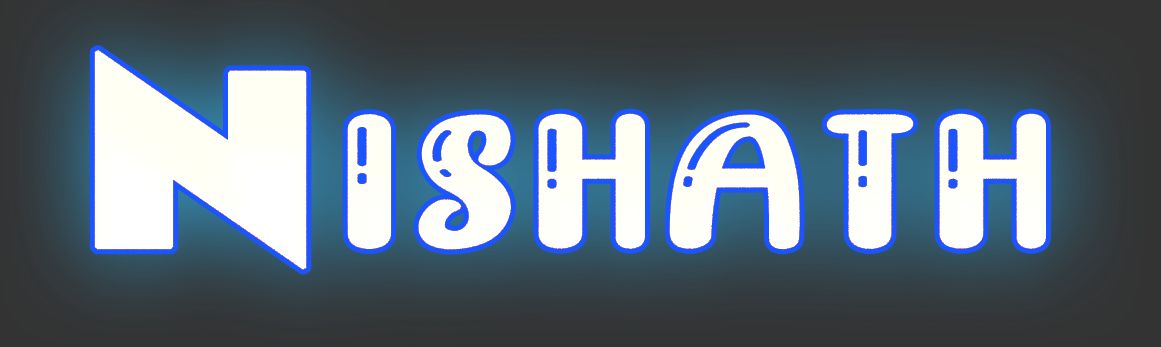
<style>
.page{position:relative;width:1161px;height:347px}
.page>*{position:absolute;margin:0}
.t1{font:151.6px "BrighlyCrush-Shine";letter-spacing:0.06em;color:#ffffff;font-weight:bold;scale:1.44 1}
.t2{font:210.3px "SheepingCatsStraight";letter-spacing:0.06em;color:#ffffff;font-weight:bold;scale:1.44 1}
</style>
<div class="page">
<p class="t1" style="left:94px;top:50px;width:952px;height:220px"><span class="t2">N</span>ishath</p>
</div>
